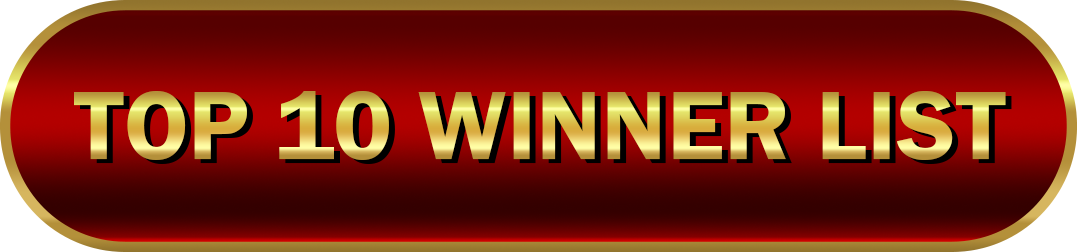
<style>
.page{position:relative;width:1077px;height:252px}
.page>*{position:absolute;margin:0}
.t1{font:101.2px "FranklinGothic-Demi"}
</style>
<div class="page">
<p class="t1" style="left:74px;top:91px;width:932px;height:69px">TOP 10 WINNER LIST</p>
</div>
